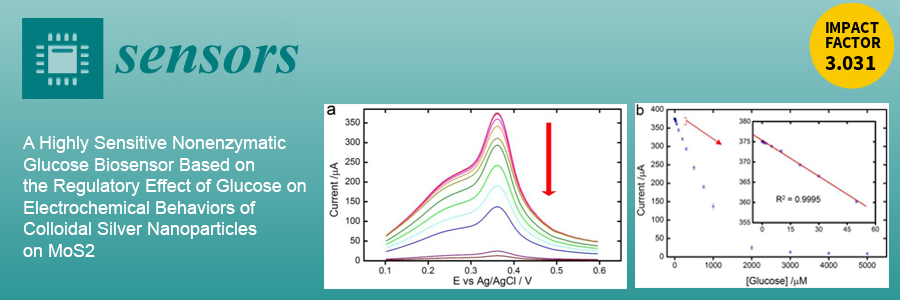
<style>
.page{position:relative;width:900px;height:300px;background:#ffffff}
.page>*{position:absolute;margin:0}
.t1{font:18px "ArialMT";color:#ffffff}
</style>
<div class="page">
<p class="t1" style="left:22px;top:136px;width:284px;height:121px">A Highly Sensitive Nonenzymatic <br>Glucose Biosensor Based on <br>the Regulatory Effect of Glucose on <br>Electrochemical Behaviors of <br>Colloidal Silver Nanoparticles <br>on MoS2</p>
</div>
